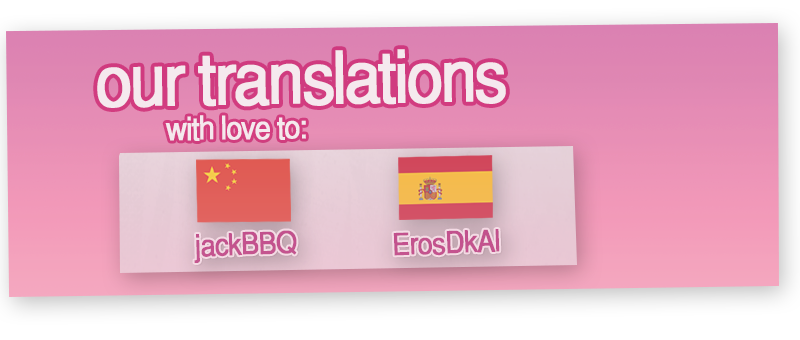
<style>
.page{position:relative;width:800px;height:340px}
.page>*{position:absolute;margin:0}
.t1{font:72px "Helvetica-Normal";letter-spacing:-0.06em;color:#f5e9ee;font-weight:bold;scale:0.9 1}
.t2{font:32px "Helvetica-Normal";letter-spacing:-0.06em;color:#f5e9ee;font-weight:bold;scale:0.9 1}
.t3{font:30px "Helvetica-Normal";letter-spacing:-0.05em;color:#c3528e;font-weight:bold;scale:0.9 1}
.t4{font:30px "Helvetica-Normal";letter-spacing:-0.05em;color:#c3518e;font-weight:bold;scale:0.9 1}
</style>
<div class="page">
<p class="t1" style="left:97px;top:49px;width:409px;height:59px;rotate:-1deg">our translations</p>
<p class="t2" style="left:165px;top:115px;width:141px;height:26px;rotate:-1deg">with love to:</p>
<p class="t3" style="left:194px;top:230px;width:103px;height:33px;rotate:-2deg">jackBBQ</p>
<p class="t4" style="left:393px;top:229px;width:107px;height:27px;rotate:-2deg">ErosDkAl</p>
</div>
